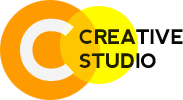
<style>
.page{position:relative;width:183px;height:100px;background:#ffffff}
.page>*{position:absolute;margin:0}
.t1{font:85px "nevis-Bold";letter-spacing:-0.025em;color:#f4f4f4;text-transform:uppercase}
.t2{font:20px "nevis-Bold";letter-spacing:-0.025em;color:#090909;text-transform:uppercase}
</style>
<div class="page">
<p class="t1" style="left:20px;top:18px;width:54px;height:63px">C</p>
<p class="t2" style="left:79px;top:29px;width:104px;height:39px">creative<br>studio</p>
</div>
